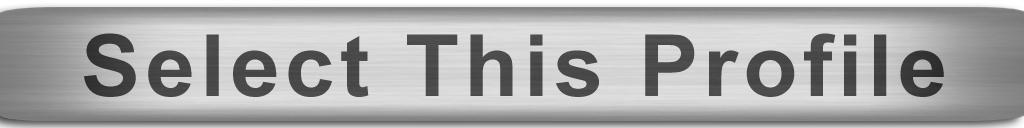
<style>
.page{position:relative;width:1024px;height:128px}
.page>*{position:absolute;margin:0}
.t1{font:85.8px "Arial-BoldMT";letter-spacing:0.06em;color:#484848;scale:1.04 1}
</style>
<div class="page">
<p class="t1" style="left:84px;top:33px;width:860px;height:64px">Select This Profile</p>
</div>
